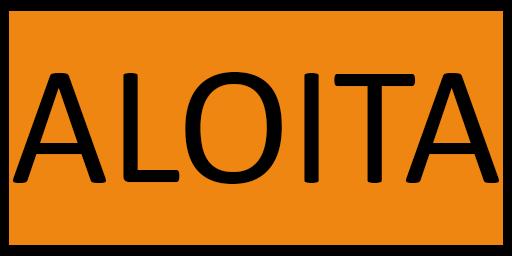
<style>
.page{position:relative;width:512px;height:256px;background:#ef8611}
.page>*{position:absolute;margin:0}
.t1{font:171px "Calibri";color:#000000}
</style>
<div class="page">
<p class="t1" style="left:12px;top:72px;width:487px;height:112px">ALOITA</p>
</div>
